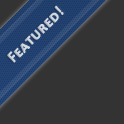
<style>
.page{position:relative;width:124px;height:124px;background:#333333}
.page>*{position:absolute;margin:0}
.t1{font:16px "Calibri-Bold";color:#d2d8e0;font-variant:small-caps;font-weight:bold}
</style>
<div class="page">
<p class="t1" style="left:7px;top:5px;width:57px;height:58px;rotate:-45deg">Featured!</p>
</div>
